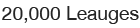
<style>
.page{position:relative;width:140px;height:28px;background:#ffffff}
.page>*{position:absolute;margin:0}
.t1{font:19.2px "HelveticaNeue";color:#242424}
</style>
<div class="page">
<p class="t1" style="left:2px;top:6px;width:137px;height:18px">20,000 Leauges</p>
</div>
